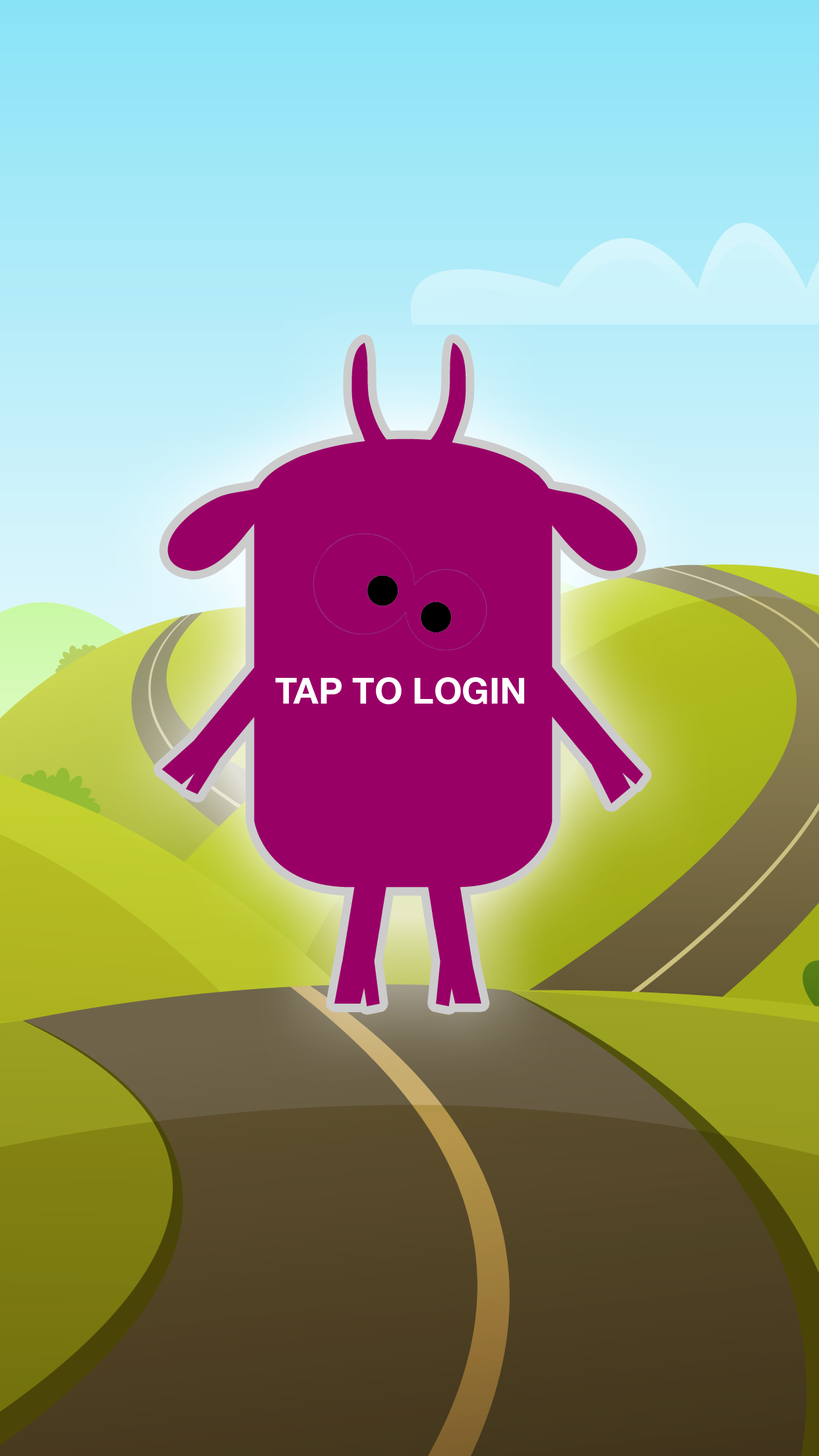
<style>
.page{position:relative;width:819px;height:1456px}
.page>*{position:absolute;margin:0}
.t1{font:36px "HelveticaNeue-Bold";color:#ffffff}
</style>
<div class="page">
<p class="t1" style="left:275px;top:677px;width:249px;height:27px">TAP TO LOGIN</p>
</div>
